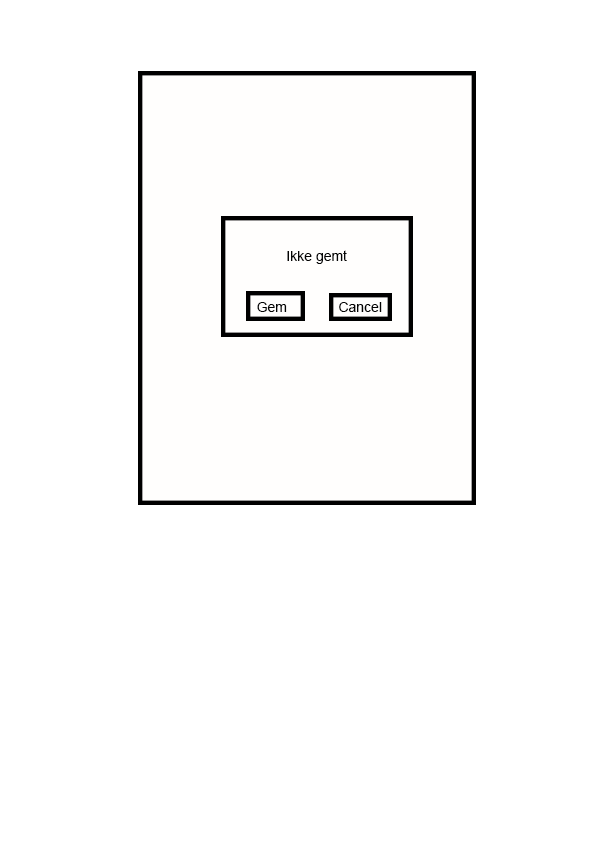
<style>
.page{position:relative;width:595px;height:842px;background:#ffffff}
.page>*{position:absolute;margin:0}
.t1{font:14px "ArialMT";color:#040404}
</style>
<div class="page">
<p class="t1" style="left:287px;top:250px;width:60px;height:14px">Ikke gemt</p>
<p class="t1" style="left:257px;top:302px;width:30px;height:10px">Gem</p>
<p class="t1" style="left:339px;top:302px;width:43px;height:10px">Cancel</p>
</div>
